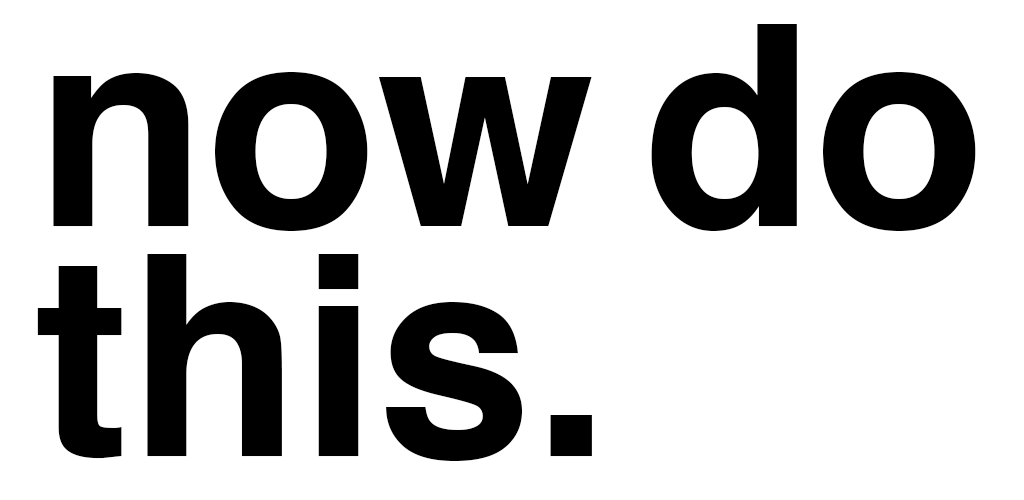
<style>
.page{position:relative;width:1024px;height:500px;background:#ffffff}
.page>*{position:absolute;margin:0}
.t1{font:280px/230px "Helvetica-Bold";color:#000000}
</style>
<div class="page">
<p class="t1" style="left:37px;top:24px;width:939px;height:437px">now do<br>this.</p>
</div>
